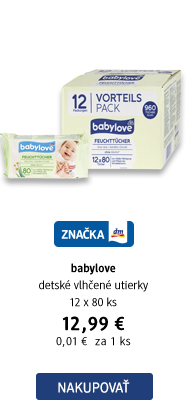
<style>
.page{position:relative;width:188px;height:409px;background:#ffffff}
.page>*{position:absolute;margin:0}
.t1{font:12px/17px "DMBrand-Regular";color:#000000}
.t2{font:12px/17px "DMBrand-Bold";color:#000000}
.t3{font:20px "DMBrand-Bold";letter-spacing:0.04em;color:#000000}
.t4{font:12px/15px "DMBrand-Regular";letter-spacing:0.04em;color:#000000}
.t5{font:14px "DMBrand-Regular";letter-spacing:0.025em;color:#ffffff;text-transform:uppercase}
</style>
<div class="page">
<p class="t1" style="left:39px;top:263px;width:109px;height:84px;text-align:center"><span class="t2">babylove <br></span>detské vlhčené utierky <br>12 x 80 ks<br><span class="t3">12,99 €<br></span><span class="t4">0,01 €  za 1 ks</span></p>
<p class="t5" style="left:58px;top:379px;width:72px;height:14px">Nakupovať</p>
</div>
